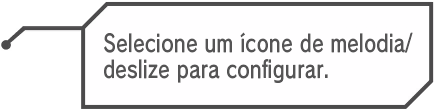
<style>
.page{position:relative;width:436px;height:110px;background:#fffeff}
.page>*{position:absolute;margin:0}
.t1{font:23.8px "RodinPro-DB";letter-spacing:0.018em;color:#555455;scale:0.79 1}
</style>
<div class="page">
<p class="t1" style="left:104px;top:32px;width:309px;height:21px">Selecione um ícone de melodia/</p>
<p class="t1" style="left:104px;top:59px;width:224px;height:24px">deslize para configurar.</p>
</div>
